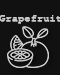
<style>
.page{position:relative;width:60px;height:75px;background:#111111}
.page>*{position:absolute;margin:0}
.t1{font:10px "CourierNewPSMT";color:#cccccc;font-weight:bold}
</style>
<div class="page">
<p class="t1" style="left:0px;top:15px;width:62px;height:9px">Grapefruit</p>
</div>
